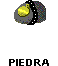
<style>
.page{position:relative;width:58px;height:66px;background:#ffffff}
.page>*{position:absolute;margin:0}
.t1{font:10.3px "Arial-BoldMT";color:#000000;scale:1.11 1}
</style>
<div class="page">
<p class="t1" style="left:9px;top:59px;width:40px;height:7px">PIEDRA</p>
</div>
